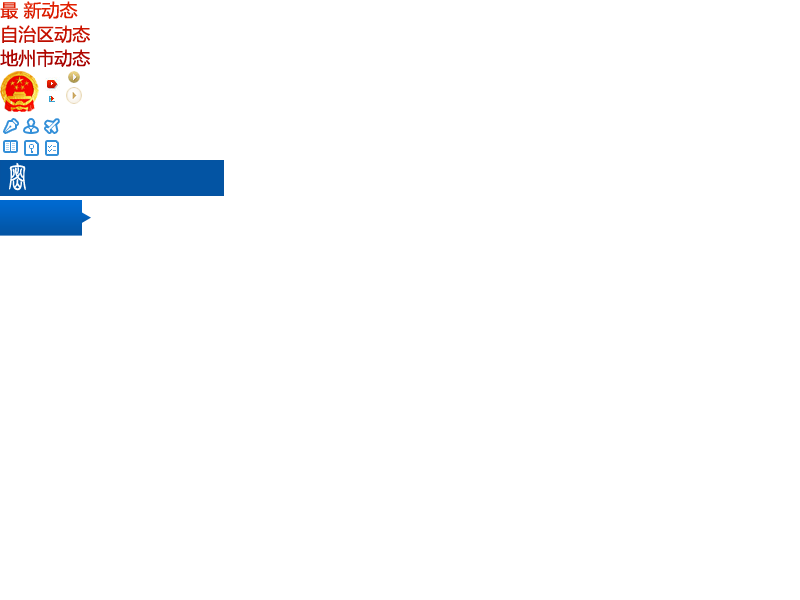
<style>
.page{position:relative;width:800px;height:600px;background:#ffffff}
.page>*{position:absolute;margin:0}
.t1{font:18px/24px "MicrosoftYaHei"}
.t2{font:30px "FZXZTFW--GB1-0";color:#ffffff}
</style>
<div class="page">
<p class="t1" style="left:0px;top:1px;width:90px;height:66px">最 新动态       <br>自治区动态       <br>地州市动态</p>
<p class="t2" style="left:9px;top:162px;width:17px;height:29px">密</p>
</div>
